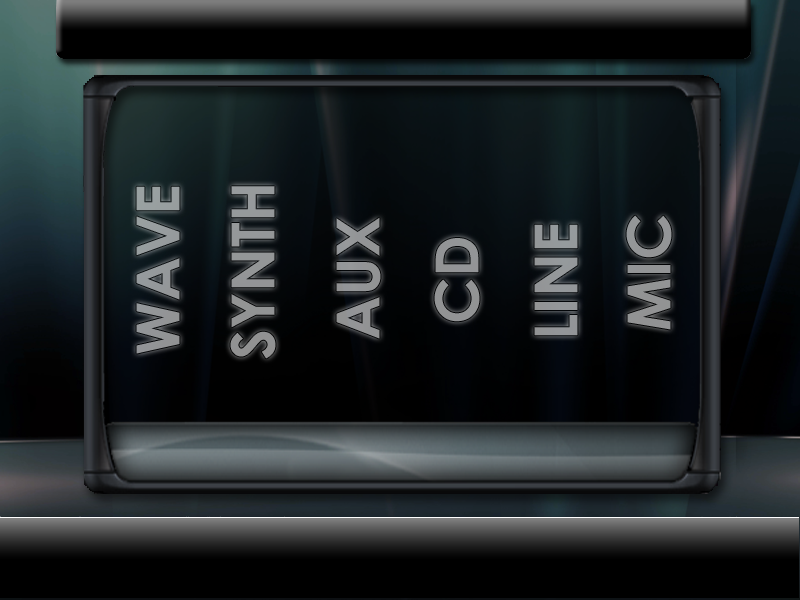
<style>
.page{position:relative;width:800px;height:600px}
.page>*{position:absolute;margin:0}
.t1{font:60px "CenturyGothic-Bold";color:#95999b}
.t2{font:60px "CenturyGothic-Bold";color:#949697}
.t3{font:60px "CenturyGothic-Bold";color:#939496}
.t4{font:60px "CenturyGothic-Bold";color:#939495}
.t5{font:60px "CenturyGothic-Bold";color:#94979a}
.t6{font:60px "CenturyGothic-Bold";color:#929495}
</style>
<div class="page">
<p class="t1" style="left:136px;top:186px;width:44px;height:168px;rotate:-90deg">WAVE</p>
<p class="t2" style="left:230px;top:186px;width:46px;height:173px;rotate:-90deg">SYNTH</p>
<p class="t3" style="left:336px;top:217px;width:45px;height:122px;rotate:-90deg">AUX</p>
<p class="t4" style="left:626px;top:215px;width:46px;height:115px;rotate:-90deg">MIC</p>
<p class="t5" style="left:534px;top:224px;width:44px;height:112px;rotate:-90deg">LINE</p>
<p class="t6" style="left:434px;top:238px;width:46px;height:84px;rotate:-90deg">CD</p>
</div>
